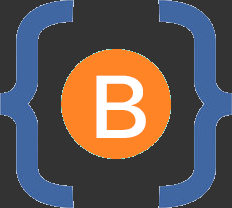
<style>
.page{position:relative;width:232px;height:208px;background:#333333}
.page>*{position:absolute;margin:0}
.t1{font:85.6px "Inter-Medium";letter-spacing:0.1em;color:#ffffff;scale:1.1 1}
</style>
<div class="page">
<p class="t1" style="left:96px;top:75px;width:50px;height:63px">B</p>
</div>
